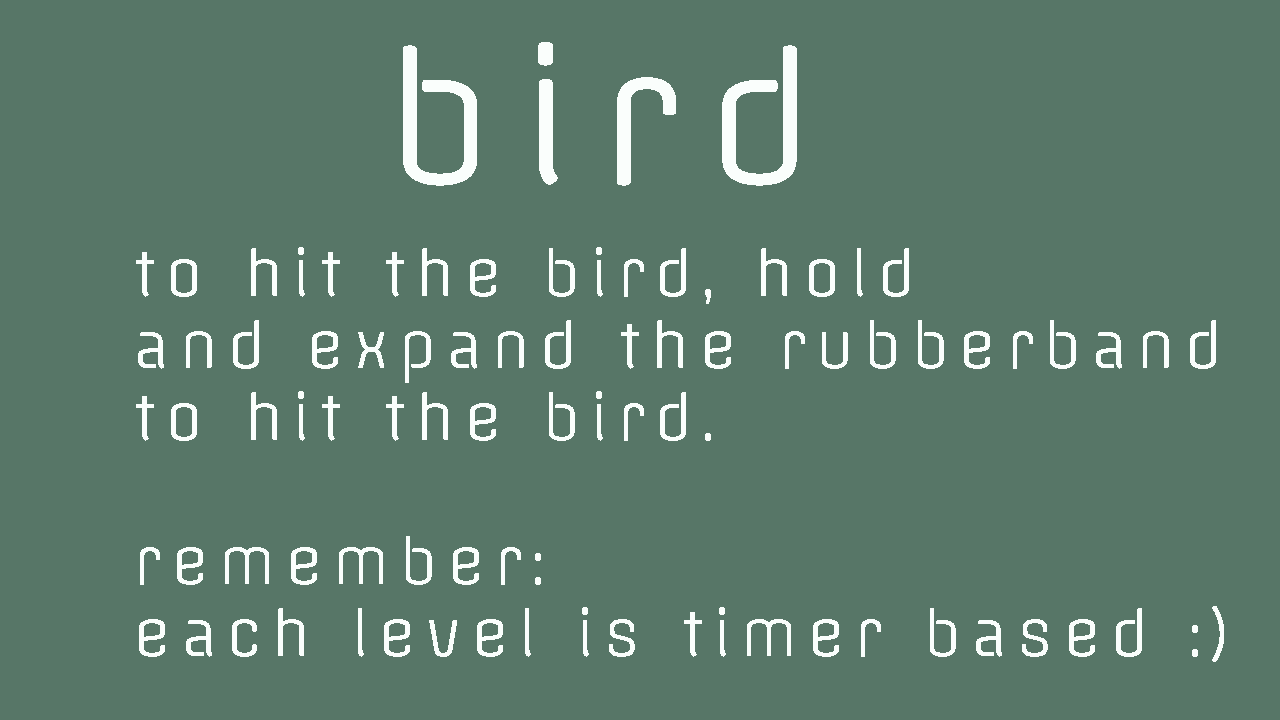
<style>
.page{position:relative;width:1280px;height:720px;background:#577667}
.page>*{position:absolute;margin:0}
.t1{font:172px "Offside-Regular";letter-spacing:0.15em;color:#fafefc}
.t2{font:60px "Offside-Regular";letter-spacing:0.15em;color:#fafefc}
</style>
<div class="page">
<p class="t1" style="left:403px;top:42px;width:394px;height:144px">bird</p>
<p class="t2" style="left:136px;top:247px;width:1088px;height:415px;text-align:right">to hit the bird, hold<br>and expand the rubberband<br>to hit the bird. <br><br>remember: <br>each level is timer based :)</p>
</div>
